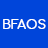
<style>
.page{position:relative;width:48px;height:48px;background:#0045da}
.page>*{position:absolute;margin:0}
.t1{font:12.5px "Comfortaa-Bold";color:#ffffff}
</style>
<div class="page">
<p class="t1" style="left:3px;top:19px;width:43px;height:10px">BFAOS</p>
</div>
